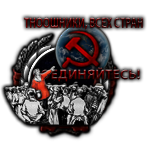
<style>
.page{position:relative;width:152px;height:142px;background:#ffffff}
.page>*{position:absolute;margin:0}
.t1{font:14.7px "MyriadPro-Bold";scale:0.66 1}
</style>
<div class="page">
<p class="t1" style="left:24px;top:17px;width:119px;height:13px">ТНООШНИКИ, ВСЕХ СТРАН</p>
</div>
